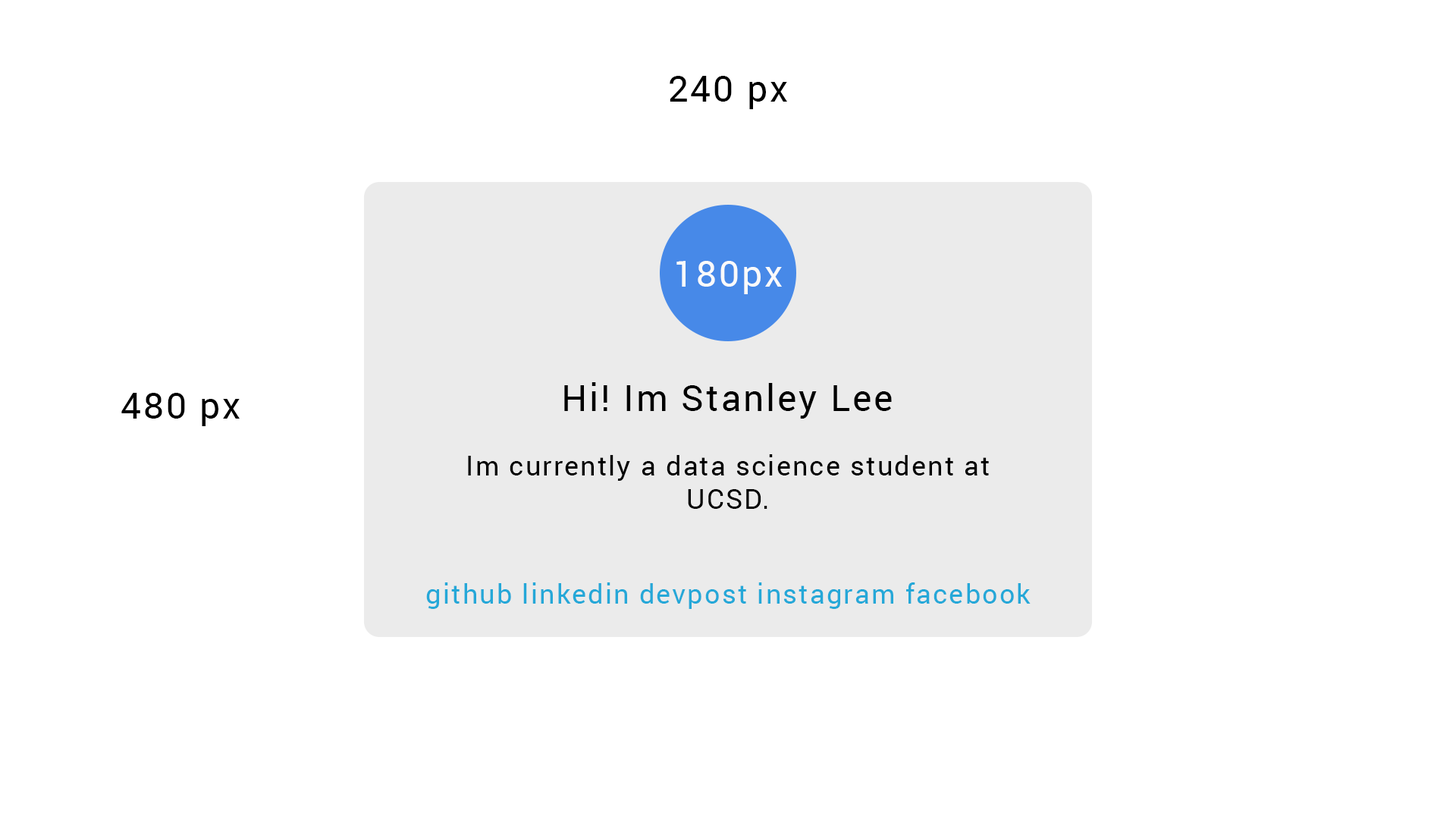
<style>
.page{position:relative;width:1456px;height:819px;background:#ffffff}
.page>*{position:absolute;margin:0}
.t1{font:36.4px "Roboto-Regular";letter-spacing:0.06em;color:#000000}
.t2{font:36.4px "Roboto-Regular";letter-spacing:0.06em;color:#fafafa}
.t3{font:27.3px "Roboto-Regular";letter-spacing:0.06em;color:#000000}
.t4{font:27.3px "Roboto-Regular";letter-spacing:0.06em;color:#25a8d8}
</style>
<div class="page">
<p class="t1" style="left:670px;top:76px;width:117px;height:33px">240 px</p>
<p class="t2" style="left:676px;top:261px;width:106px;height:33px">180px</p>
<p class="t1" style="left:564px;top:382px;width:328px;height:37px">Hi! Im Stanley Lee</p>
<p class="t1" style="left:121px;top:393px;width:119px;height:33px">480 px</p>
<p class="t3" style="left:468px;top:454px;width:521px;height:55px;text-align:center">Im currently a data science student at UCSD.</p>
<p class="t4" style="left:426px;top:582px;width:605px;height:27px">github linkedin devpost instagram facebook</p>
</div>
